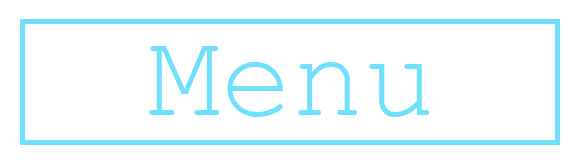
<style>
.page{position:relative;width:580px;height:163px;background:#ffffff}
.page>*{position:absolute;margin:0}
.t1{font:120px "CourierNewPSMT";color:#70e0fd}
</style>
<div class="page">
<p class="t1" style="left:149px;top:46px;width:281px;height:71px">Menu</p>
</div>
